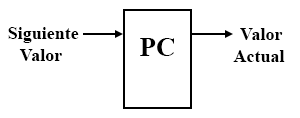
<style>
.page{position:relative;width:300px;height:118px;background:#ffffff}
.page>*{position:absolute;margin:0}
.t1{font:18px "TimesNewRomanPS-BoldMT";color:#000000}
.t2{font:27px "TimesNewRomanPS-BoldMT";color:#000000}
</style>
<div class="page">
<p class="t1" style="left:8px;top:27px;width:71px;height:34px;text-align:center">Siguiente <br>Valor</p>
<p class="t1" style="left:233px;top:28px;width:52px;height:34px;text-align:center">Valor <br>Actual</p>
<p class="t2" style="left:140px;top:38px;width:34px;height:18px">PC</p>
</div>
